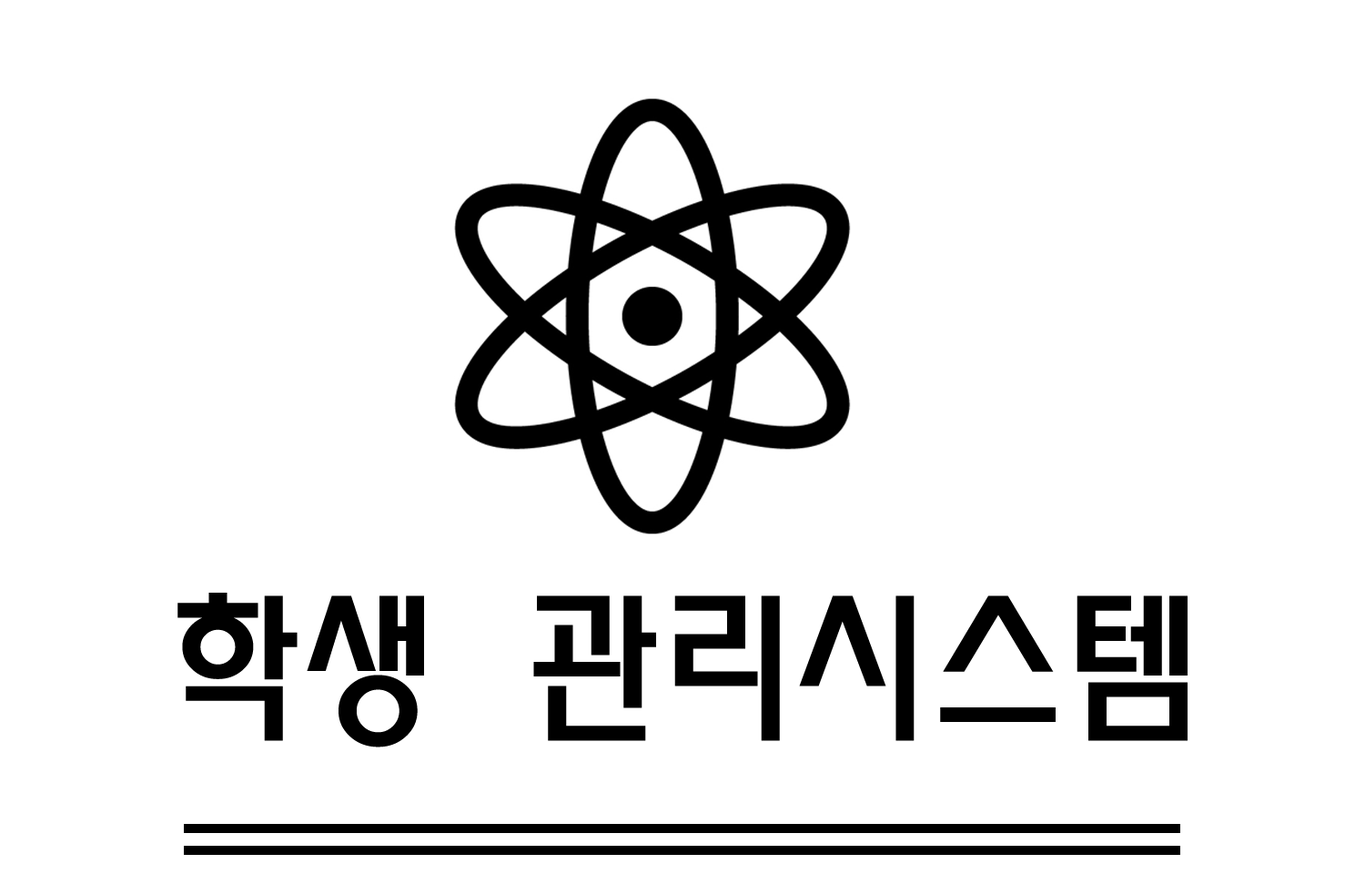
<style>
.page{position:relative;width:1365px;height:874px;background:#ffffff}
.page>*{position:absolute;margin:0}
.t1{font:163.8px "MoeumTR-HM";color:#000000}
</style>
<div class="page">
<p class="t1" style="left:177px;top:592px;width:1011px;height:155px">학생 관리시스템</p>
</div>
